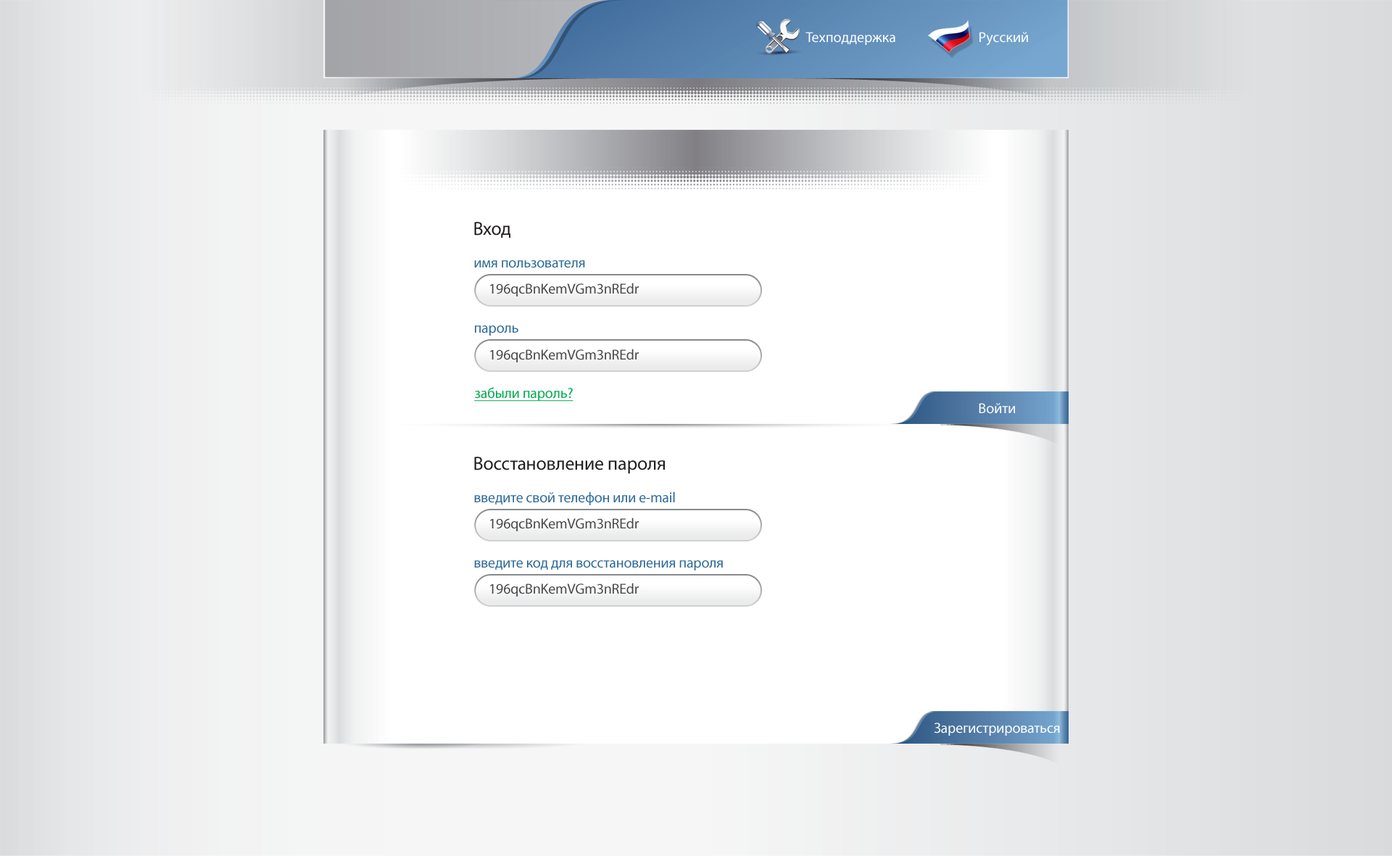
<style>
.page{position:relative;width:1392px;height:856px;background:#ffffff}
.page>*{position:absolute;margin:0}
.t1{font:14.5px "MyriadPro-Regular";color:#ffffff}
.t2{font:18.9px "MyriadPro-Regular";letter-spacing:-0.01em;color:#231f20}
.t3{font:14.5px "MyriadPro-Regular";letter-spacing:-0.01em;color:#2e6a97}
.t4{font:14.5px "MyriadPro-Regular";letter-spacing:-0.01em;color:#48484a}
.t5{font:14.5px "MyriadPro-Regular";letter-spacing:-0.01em;color:#00ab4e;text-decoration:underline}
.t6{font:14.5px "MyriadPro-Regular";letter-spacing:-0.01em;color:#ffffff}
</style>
<div class="page">
<p class="t1" style="left:806px;top:32px;width:90px;height:13px">Техподдержка</p>
<p class="t1" style="left:980px;top:32px;width:48px;height:14px">Русский</p>
<p class="t2" style="left:474px;top:222px;width:37px;height:16px">Вход</p>
<p class="t3" style="left:474px;top:260px;width:111px;height:8px">имя пользователя</p>
<p class="t4" style="left:490px;top:283px;width:149px;height:14px">196qcBnKemVGm3nREdr</p>
<p class="t3" style="left:475px;top:326px;width:43px;height:10px">пароль</p>
<p class="t4" style="left:490px;top:349px;width:149px;height:14px">196qcBnKemVGm3nREdr</p>
<p class="t5" style="left:474px;top:387px;width:100px;height:15px">забыли пароль?</p>
<p class="t1" style="left:979px;top:403px;width:36px;height:11px">Войти</p>
<p class="t2" style="left:474px;top:457px;width:191px;height:17px">Восстановление пароля</p>
<p class="t3" style="left:474px;top:492px;width:201px;height:13px">введите свой телефон или е-mail</p>
<p class="t4" style="left:490px;top:518px;width:149px;height:14px">196qcBnKemVGm3nREdr</p>
<p class="t3" style="left:474px;top:561px;width:249px;height:10px">введите код для восстановления пароля</p>
<p class="t4" style="left:490px;top:583px;width:149px;height:14px">196qcBnKemVGm3nREdr</p>
<p class="t6" style="left:934px;top:723px;width:126px;height:13px">Зарегистрироваться</p>
</div>
